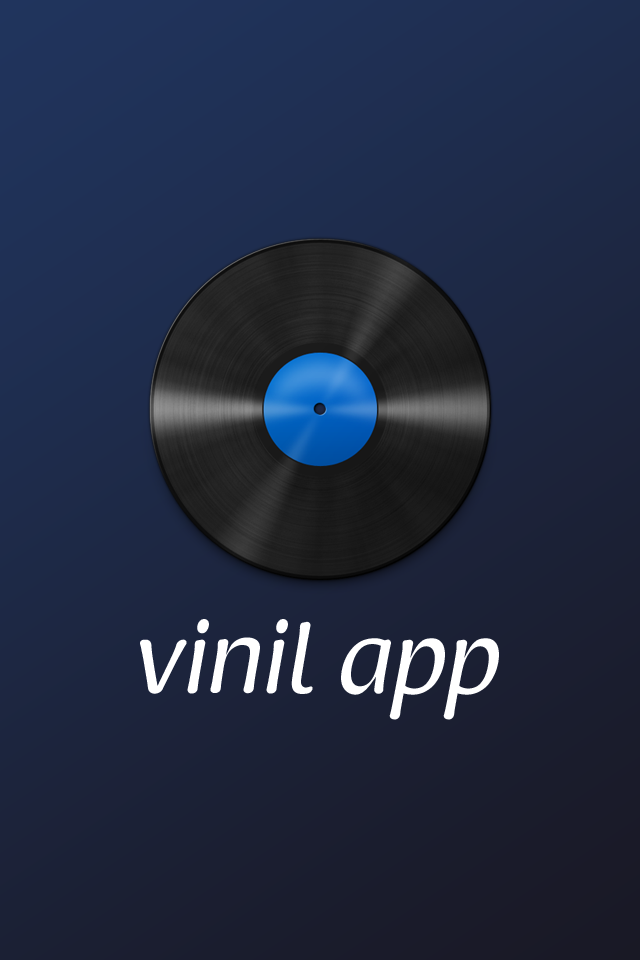
<style>
.page{position:relative;width:640px;height:960px}
.page>*{position:absolute;margin:0}
.t1{font:100px "RaspoutineClassic";color:#ffffff}
</style>
<div class="page">
<p class="t1" style="left:140px;top:619px;width:359px;height:101px">vinil app</p>
</div>
